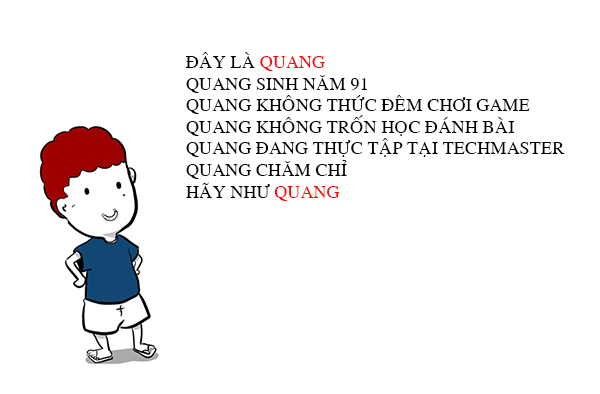
<style>
.page{position:relative;width:600px;height:394px;background:#ffffff}
.page>*{position:absolute;margin:0}
.t1{font:18px "VNI-Times";color:#000000}
.t2{font:18px "VNI-Times";color:#fa0808}
.t3{font:18px "VNI-Times";color:#f90707}
</style>
<div class="page">
<p class="t1" style="left:185px;top:52px;width:380px;height:149px">ÑAÂY LAØ <span class="t2">QUANG<br></span>QUANG SINH NAÊM 91<br>QUANG KHOÂNG THÖÙC ÑEÂM CHÔI GAME<br>QUANG KHOÂNG TROÁN HOÏC ÑAÙNH BAØI<br>QUANG ÑANG THÖÏC TAÄP TAÏI TECHMASTER<br>QUANG CHAÊM CHÆ<br>HAÕY NHÖ <span class="t3">QUANG</span></p>
</div>
